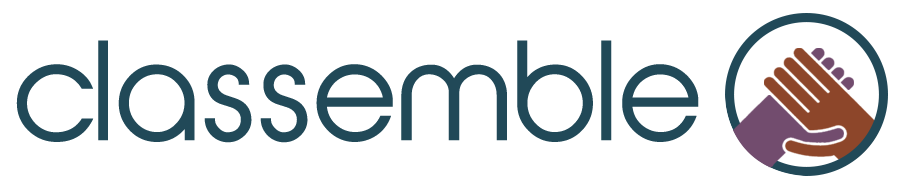
<style>
.page{position:relative;width:907px;height:187px;background:#ffffff}
.page>*{position:absolute;margin:0}
.t1{font:129.3px "AbeatbyKai";color:#214958}
</style>
<div class="page">
<p class="t1" style="left:16px;top:40px;width:683px;height:103px">classemble</p>
</div>
